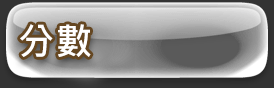
<style>
.page{position:relative;width:274px;height:88px}
.page>*{position:absolute;margin:0}
.t1{font:36.7px "MicrosoftJhengHeiBold";letter-spacing:0.025em;color:#ffffff}
</style>
<div class="page">
<p class="t1" style="left:20px;top:24px;width:71px;height:33px">分數</p>
</div>
